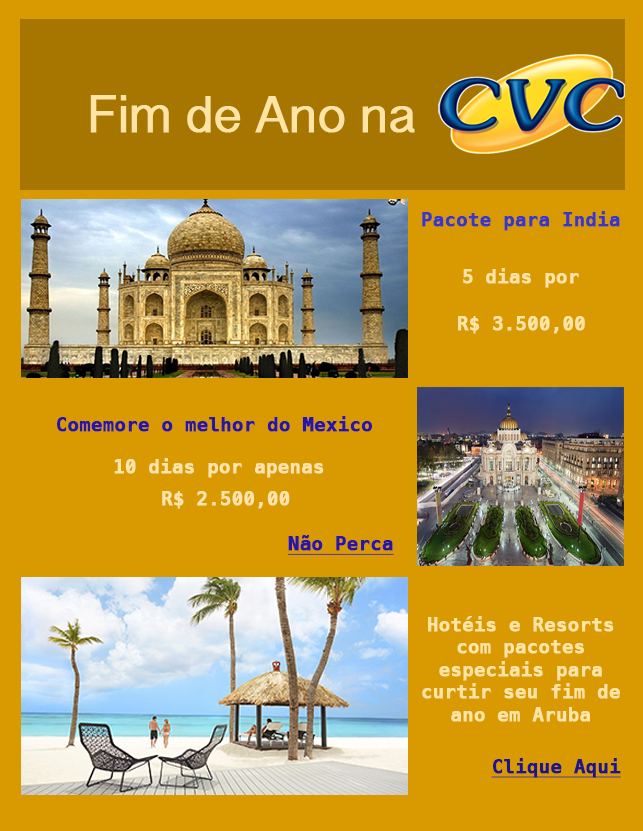
<style>
.page{position:relative;width:643px;height:831px;background:#d99900}
.page>*{position:absolute;margin:0}
.t1{font:48px "SinhalaSangamMN";color:#ffe4a4;font-weight:bold}
.t2{font:18.7px "Menlo-Bold";color:#3a37c2;font-weight:bold}
.t3{font:18.7px "Menlo-Bold";color:#ffe4a4;font-weight:bold}
.t4{font:18.7px "Menlo-Bold";color:#2814a6;font-weight:bold}
.t5{font:18.7px "Menlo-Bold";color:#ffe4aa;font-weight:bold}
.t6{font:18.7px "Menlo-Bold";color:#2814a6;font-weight:bold;text-decoration:underline}
.t7{font:18.7px "Menlo-Bold";color:#201586;font-weight:bold;text-decoration:underline}
</style>
<div class="page">
<p class="t1" style="left:90px;top:95px;width:325px;height:38px">Fim de Ano na</p>
<p class="t2" style="left:422px;top:211px;width:198px;height:20px">Pacote para India</p>
<p class="t3" style="left:463px;top:268px;width:116px;height:20px"><span class="t2"> </span>5 dias por</p>
<p class="t3" style="left:458px;top:316px;width:127px;height:18px">R$ 3.500,00</p>
<p class="t4" style="left:57px;top:416px;width:315px;height:16px">Comemore o melhor do Mexico</p>
<p class="t5" style="left:114px;top:458px;width:210px;height:20px">10 dias por apenas</p>
<p class="t5" style="left:162px;top:491px;width:128px;height:18px">R$ 2.500,00</p>
<p class="t6" style="left:287px;top:535px;width:107px;height:20px">Não Perca</p>
<p class="t3" style="left:422px;top:616px;width:198px;height:106px;text-align:center">Hotéis e Resorts com pacotes especiais para curtir seu fim de ano em Aruba</p>
<p class="t7" style="left:491px;top:758px;width:130px;height:20px">Clique Aqui</p>
</div>
